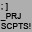
<style>
.page{position:relative;width:32px;height:32px;background:#aeaeae}
.page>*{position:absolute;margin:0}
.t1{font:8.3px "ArialMT";color:#010101}
</style>
<div class="page">
<p class="t1" style="left:0px;top:3px;width:31px;height:26px">; ]<br>_PRJ<br>SCPTS!</p>
</div>
